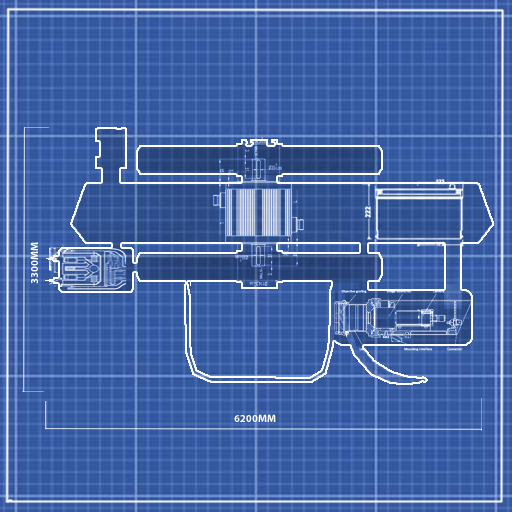
<style>
.page{position:relative;width:512px;height:512px}
.page>*{position:absolute;margin:0}
.t1{font:10.7px "MyriadPro-Bold";color:#ffffff;text-transform:uppercase}
</style>
<div class="page">
<p class="t1" style="left:30px;top:242px;width:8px;height:42px;rotate:-90deg">3300mm</p>
<p class="t1" style="left:234px;top:414px;width:42px;height:8px">6200mm</p>
</div>
